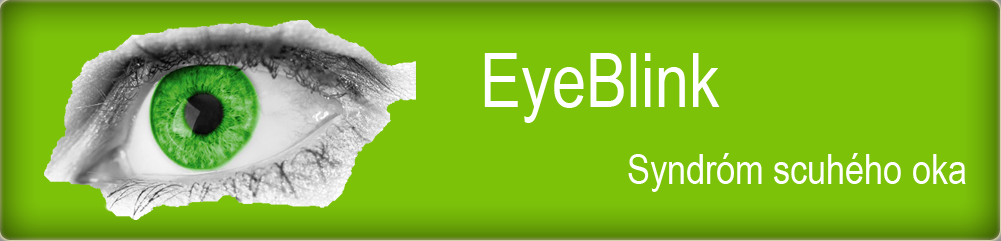
<style>
.page{position:relative;width:1001px;height:241px;background:#7cc209}
.page>*{position:absolute;margin:0}
.t1{font:75px "ArialNarrow";color:#ffffff}
.t2{font:41.7px "ArialNarrow";color:#ffffff}
</style>
<div class="page">
<p class="t1" style="left:484px;top:53px;width:236px;height:70px">EyeBlink</p>
<p class="t2" style="left:628px;top:153px;width:338px;height:39px">Syndróm scuhého oka</p>
</div>
